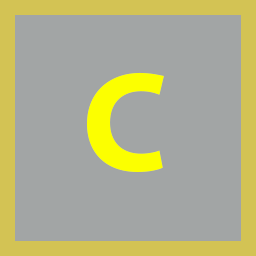
<style>
.page{position:relative;width:256px;height:256px;background:#a2a5a5}
.page>*{position:absolute;margin:0}
.t1{font:144px "MyriadPro-Bold";color:#fcff00}
</style>
<div class="page">
<p class="t1" style="left:87px;top:72px;width:77px;height:100px">C</p>
</div>
